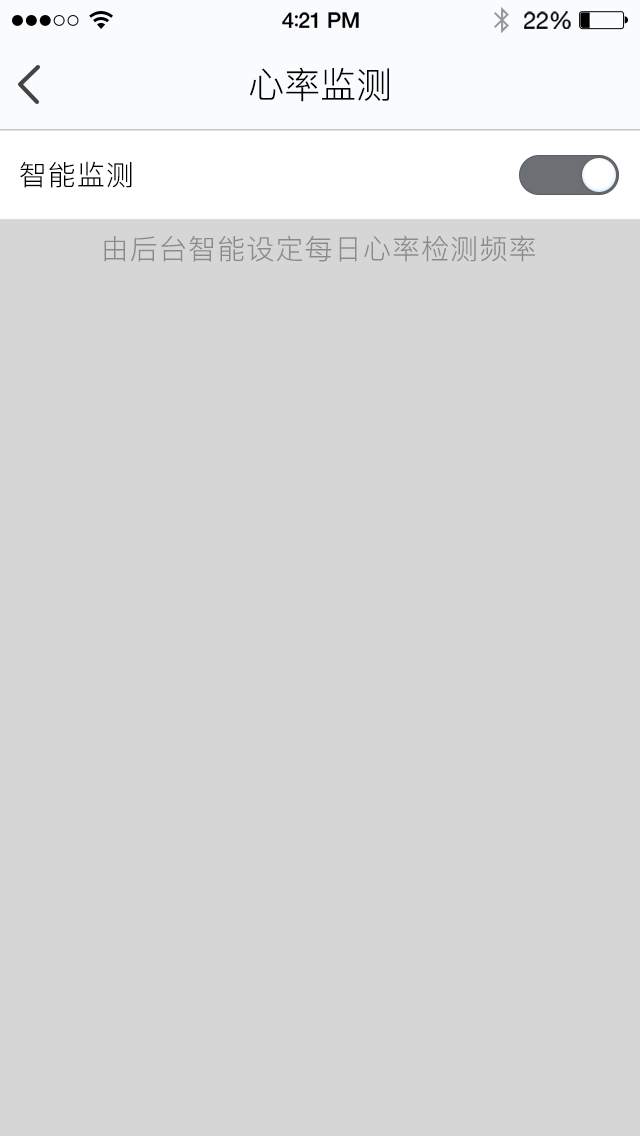
<style>
.page{position:relative;width:640px;height:1136px;background:#d6d6d7}
.page>*{position:absolute;margin:0}
.t1{font:36px "PingFang-SC-Regular";color:#000000}
.t2{font:28px "PingFang-SC-Regular";letter-spacing:0.04em;color:#000000}
.t3{font:28px "PingFang-SC-Regular";letter-spacing:0.04em;color:#8a8a8a}
</style>
<div class="page">
<p class="t1" style="left:250px;top:67px;width:139px;height:35px">心率监测</p>
<p class="t2" style="left:20px;top:161px;width:112px;height:27px">智能监测</p>
<p class="t3" style="left:104px;top:235px;width:431px;height:27px">由后台智能设定每日心率检测频率</p>
</div>
